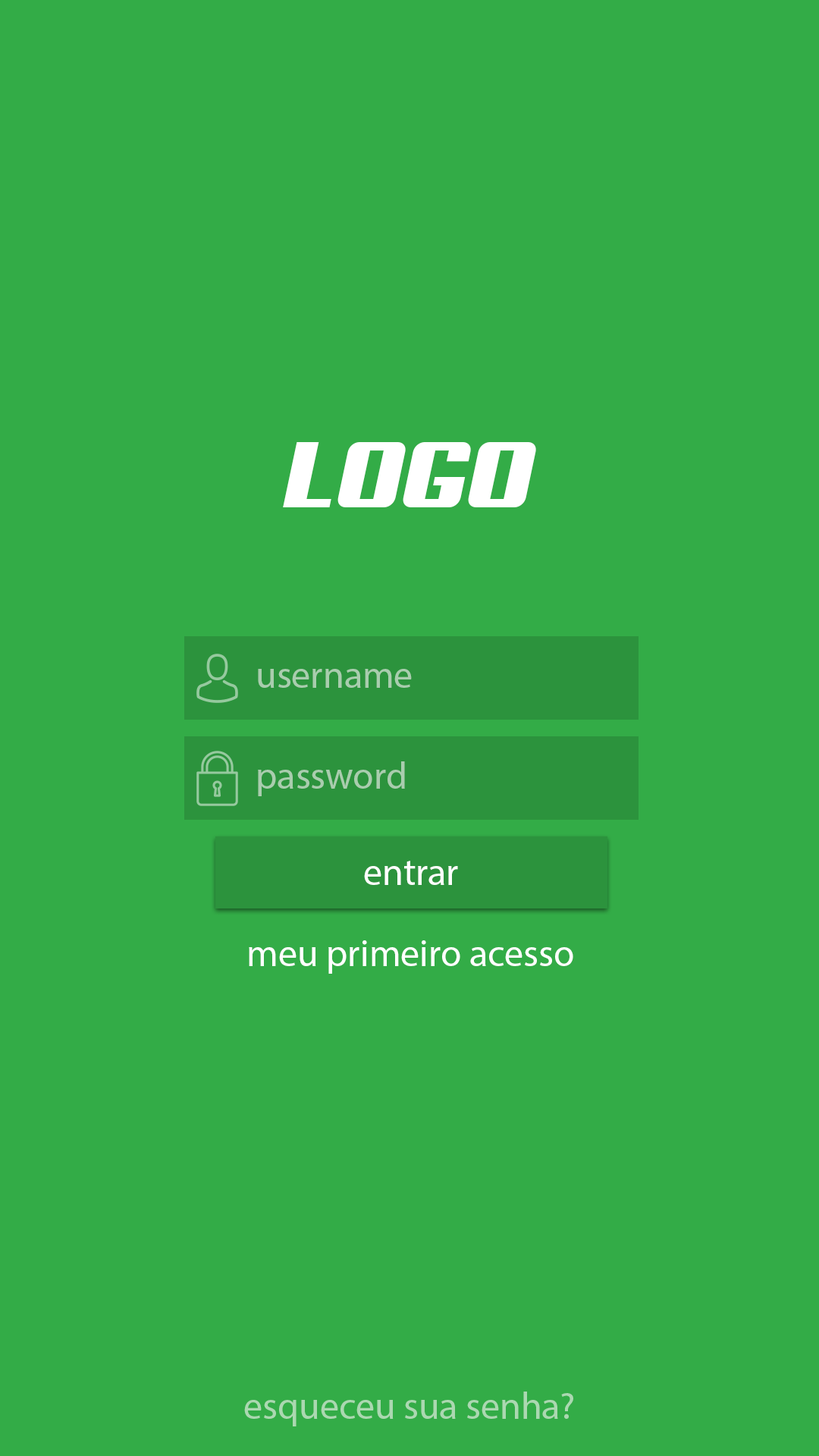
<style>
.page{position:relative;width:819px;height:1456px;background:#33ac47}
.page>*{position:absolute;margin:0}
.t1{font:94.8px "Aero";color:#ffffff}
.t2{font:37.9px "MyriadPro-Regular";color:#a9cdae}
.t3{font:37.9px "MyriadPro-Regular";color:#ffffff}
.t4{font:37.9px "MyriadPro-Regular";color:#abd8b1}
</style>
<div class="page">
<p class="t1" style="left:283px;top:442px;width:253px;height:65px">LOGO</p>
<p class="t2" style="left:258px;top:669px;width:154px;height:19px">username</p>
<p class="t2" style="left:258px;top:761px;width:147px;height:35px">password</p>
<p class="t3" style="left:364px;top:861px;width:94px;height:24px">entrar</p>
<p class="t3" style="left:249px;top:940px;width:324px;height:34px">meu primeiro acesso</p>
<p class="t4" style="left:244px;top:1392px;width:329px;height:34px">esqueceu sua senha?</p>
</div>
